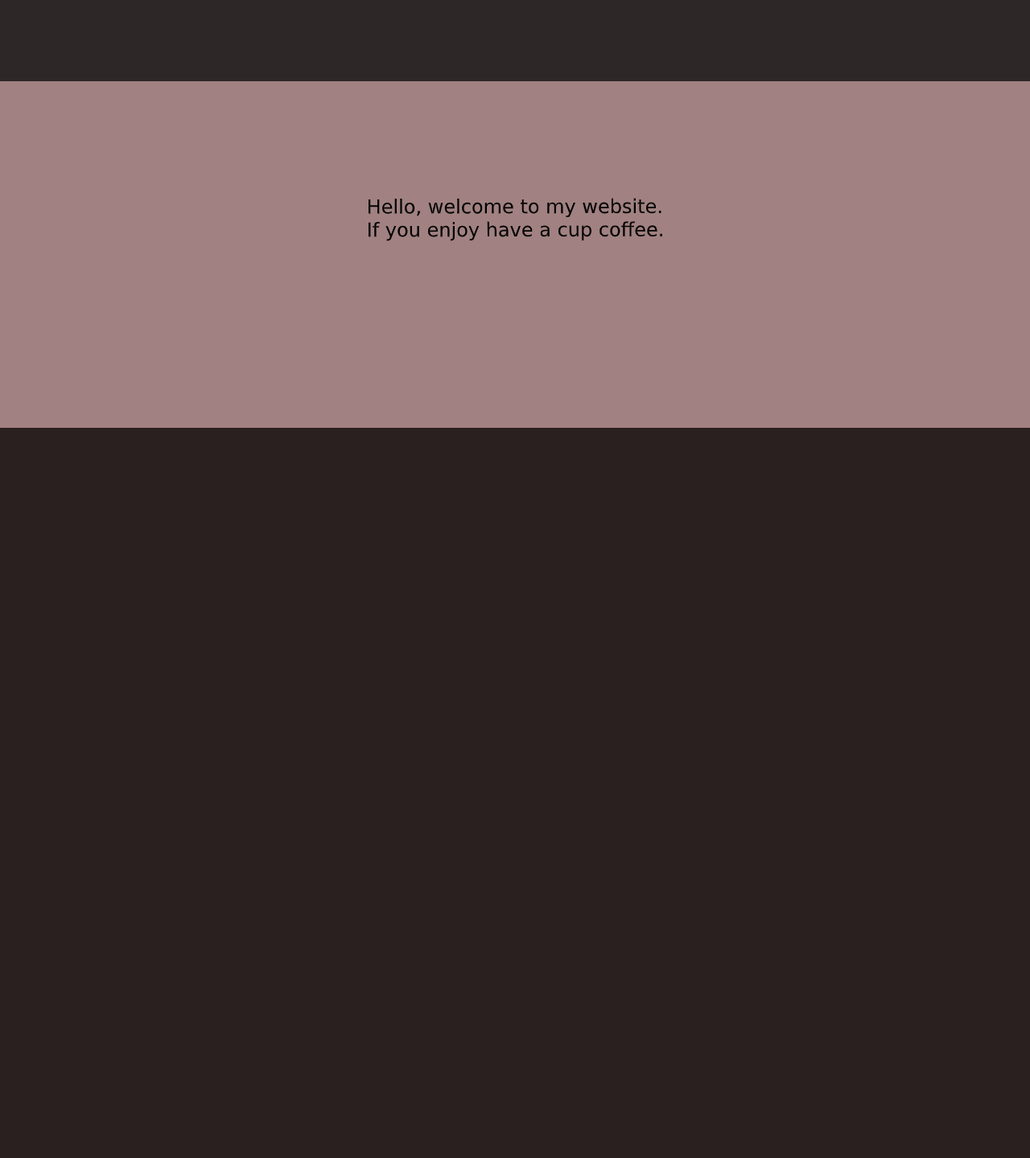
<style>
.page{position:relative;width:1030px;height:1158px;background:#2a2020}
.page>*{position:absolute;margin:0}
.t1{font:19.3px "DejaVuSans";color:#000000}
</style>
<div class="page">
<p class="t1" style="left:368px;top:198px;width:294px;height:43px">Hello, welcome to my website. If you enjoy have a cup coffee.</p>
</div>
